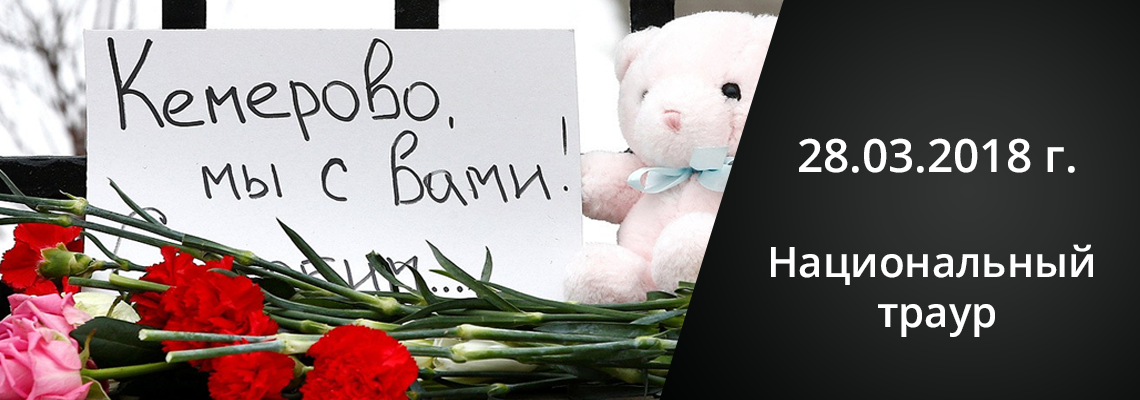
<style>
.page{position:relative;width:1140px;height:400px}
.page>*{position:absolute;margin:0}
.t1{font:46px "OpenSans-Semibold";color:#ffffff}
.t2{font:42px "OpenSans-Semibold";color:#ffffff}
</style>
<div class="page">
<p class="t1" style="left:799px;top:138px;width:276px;height:35px">28.03.2018 г.</p>
<p class="t2" style="left:771px;top:244px;width:322px;height:93px;text-align:center">Национальный <br>траур</p>
</div>
